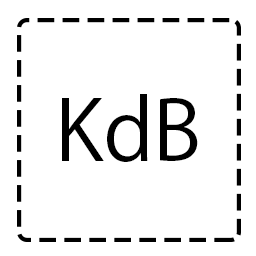
<style>
.page{position:relative;width:256px;height:256px;background:#ffffff}
.page>*{position:absolute;margin:0}
.t1{font:83.3px "KozGoPr6N-Regular";color:#000000}
</style>
<div class="page">
<p class="t1" style="left:62px;top:94px;width:136px;height:68px">KdB</p>
</div>
